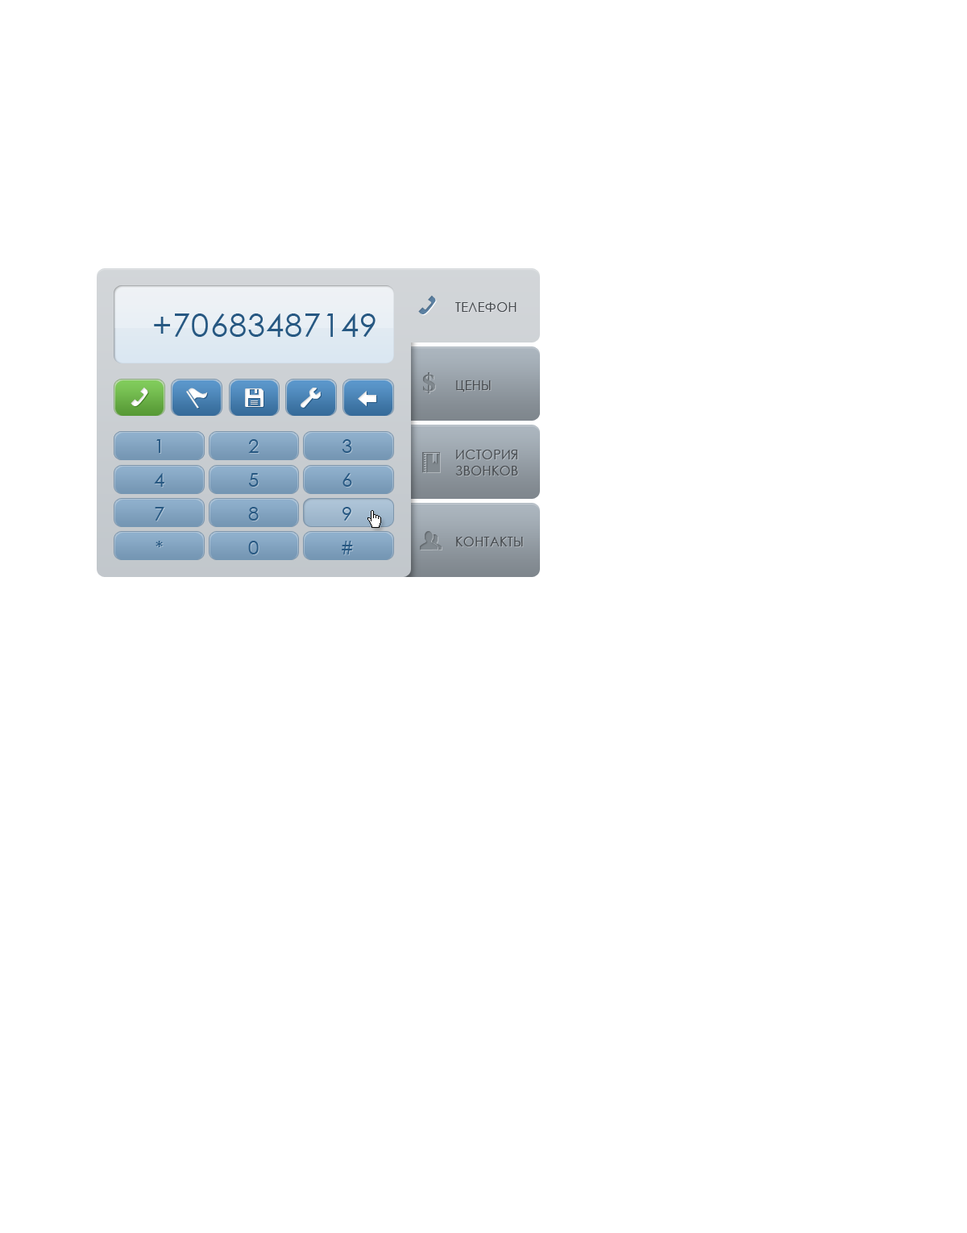
<style>
.page{position:relative;width:967px;height:1233px;background:#ffffff}
.page>*{position:absolute;margin:0}
.t1{font:12.9px/78.2px "CenturyGothic";letter-spacing:0.025em;color:#45494d;text-transform:uppercase}
.t2{font:12.9px/69.3px "CenturyGothic";letter-spacing:0.025em;color:#45494d;text-transform:uppercase}
.t3{font:12.9px/16.1px "CenturyGothic";letter-spacing:0.025em;color:#45494d;text-transform:uppercase}
.t4{font:12.9px/70.9px "CenturyGothic";letter-spacing:0.025em;color:#45494d;text-transform:uppercase}
.t5{font:32.2px "CenturyGothic";letter-spacing:0.025em;color:#275882}
.t6{font:19.3px/33.8px "CenturyGothic";letter-spacing:0.025em;color:#275882;text-transform:uppercase}
</style>
<div class="page">
<p class="t1" style="left:455px;top:302px;width:68px;height:244px">телефон<br>цены<br><span class="t2">история<br></span><span class="t3">звонков<br></span><span class="t4">контакты</span></p>
<p class="t5" style="left:154px;top:313px;width:222px;height:24px">+70683487149</p>
<p class="t6" style="left:154px;top:439px;width:10px;height:108px;text-align:center">1<br>4<br>7<br>*</p>
<p class="t6" style="left:248px;top:439px;width:11px;height:115px;text-align:center">2<br>5<br>8<br>0</p>
<p class="t6" style="left:342px;top:439px;width:11px;height:115px;text-align:center">3<br>6<br>9<br>#</p>
</div>
